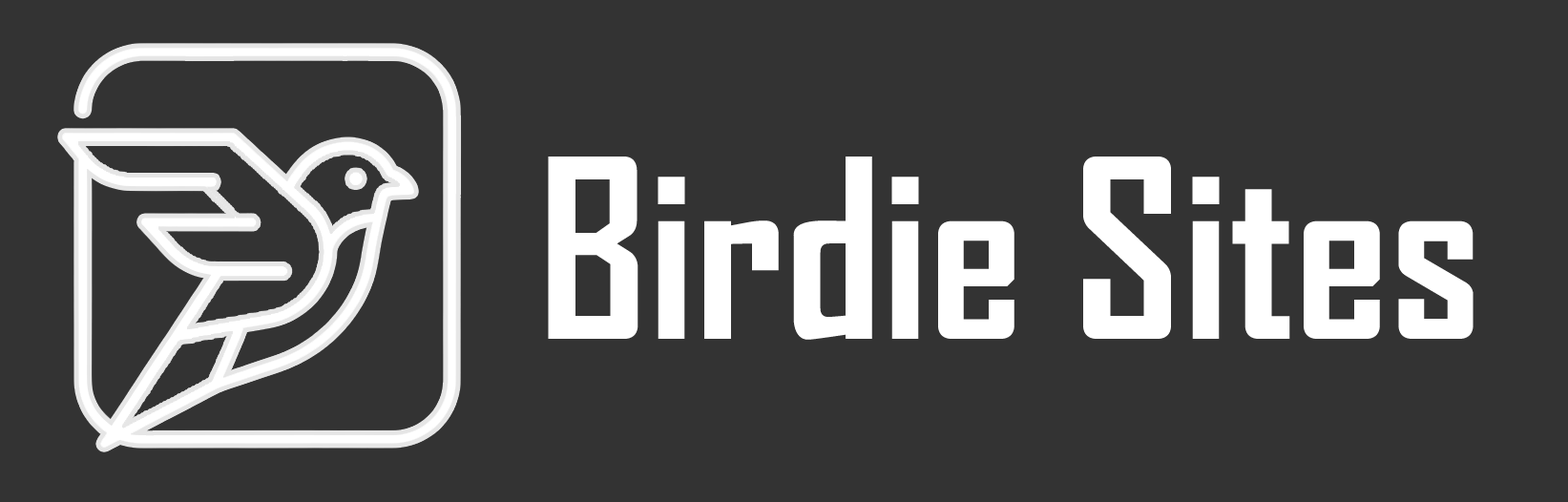
<style>
.page{position:relative;width:1568px;height:502px;background:#333333}
.page>*{position:absolute;margin:0}
.t1{font:238.6px "AgencyFB-Bold";color:#ffffff}
</style>
<div class="page">
<p class="t1" style="left:548px;top:157px;width:926px;height:183px">Birdie Sites</p>
</div>
